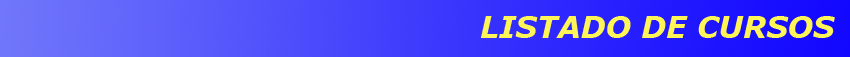
<style>
.page{position:relative;width:850px;height:57px}
.page>*{position:absolute;margin:0}
.t1{font:30px "Verdana-BoldItalic";color:#fff557}
</style>
<div class="page">
<p class="t1" style="left:481px;top:16px;width:354px;height:22px">LISTADO DE CURSOS</p>
</div>
